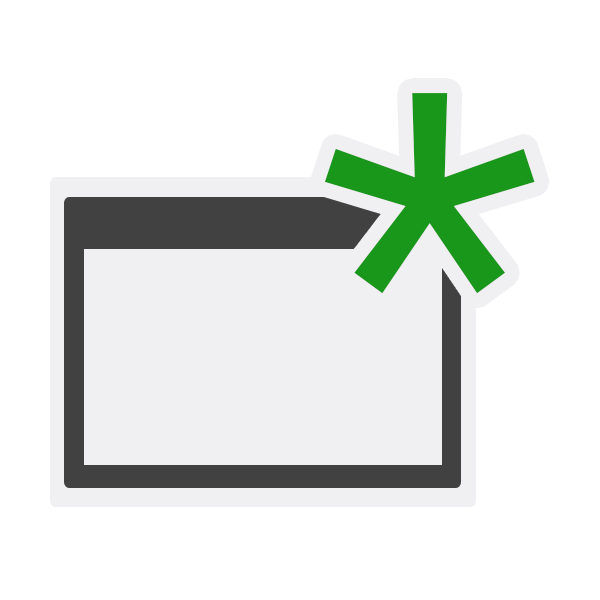
<style>
.page{position:relative;width:600px;height:600px;background:#ffffff}
.page>*{position:absolute;margin:0}
.t1{font:416.8px "FiraCode-Regular";color:#18971b}
</style>
<div class="page">
<p class="t1" style="left:324px;top:93px;width:211px;height:201px">*</p>
</div>
